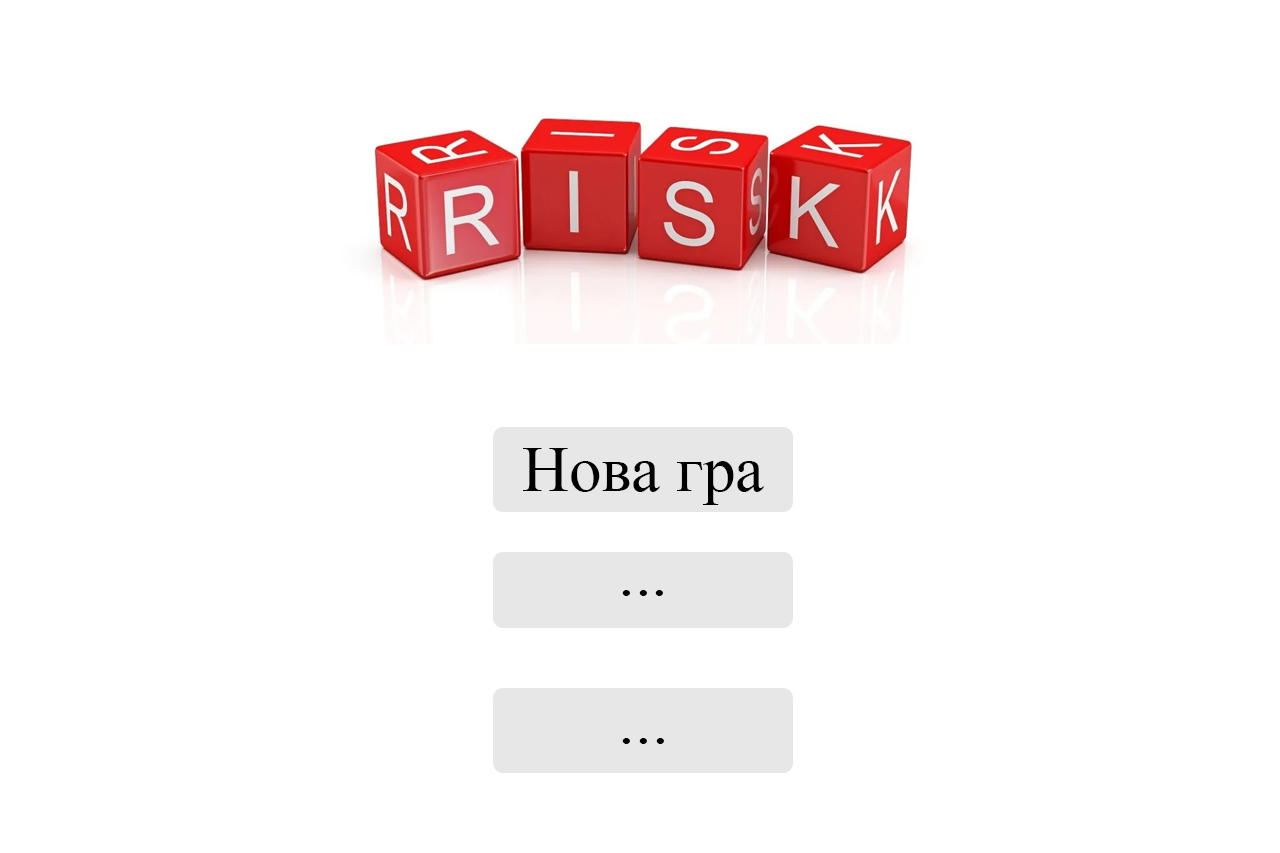
<style>
.page{position:relative;width:1280px;height:853px;background:#ffffff}
.page>*{position:absolute;margin:0}
.t1{font:65px "TimesNewRomanPSMT";color:#000000}
.t2{font:66.7px "TimesNewRomanPSMT";color:#000000}
</style>
<div class="page">
<p class="t1" style="left:523px;top:448px;width:241px;height:57px">Нова гра</p>
<p class="t2" style="left:622px;top:590px;width:41px;height:6px">...</p>
<p class="t2" style="left:622px;top:738px;width:42px;height:6px">...</p>
</div>
